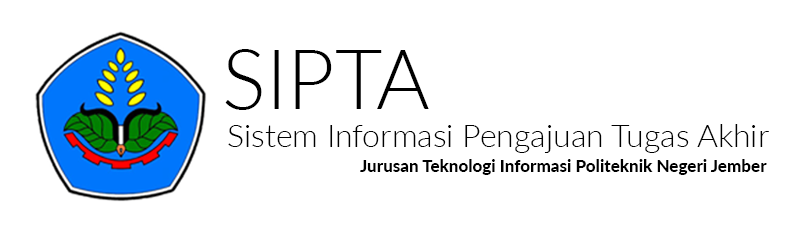
<style>
.page{position:relative;width:800px;height:248px;background:#ffffff}
.page>*{position:absolute;margin:0}
.t1{font:82px "Lato-Light";color:#000000}
.t2{font:32px "Lato-Light";color:#000000}
.t3{font:17px "Lato-Heavy";color:#000000}
</style>
<div class="page">
<p class="t1" style="left:225px;top:49px;width:204px;height:61px">SIPTA</p>
<p class="t2" style="left:228px;top:124px;width:541px;height:29px">Sistem Informasi Pengajuan Tugas Akhir</p>
<p class="t3" style="left:360px;top:159px;width:407px;height:16px">Jurusan Teknologi Informasi Politeknik Negeri Jember</p>
</div>
